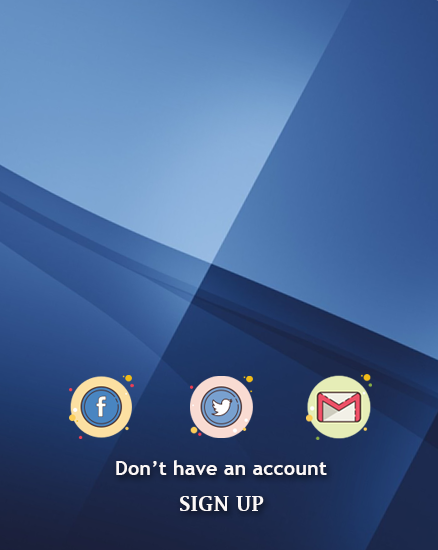
<style>
.page{position:relative;width:438px;height:550px}
.page>*{position:absolute;margin:0}
.t1{font:20.4px "TrebuchetMS-Bold";color:#fcf8f8}
.t2{font:20.4px "LucidaFax-Demi";color:#fcf8f8}
</style>
<div class="page">
<p class="t1" style="left:116px;top:460px;width:211px;height:15px">Don’t have an account</p>
<p class="t2" style="left:180px;top:496px;width:84px;height:15px">SIGN UP</p>
</div>
